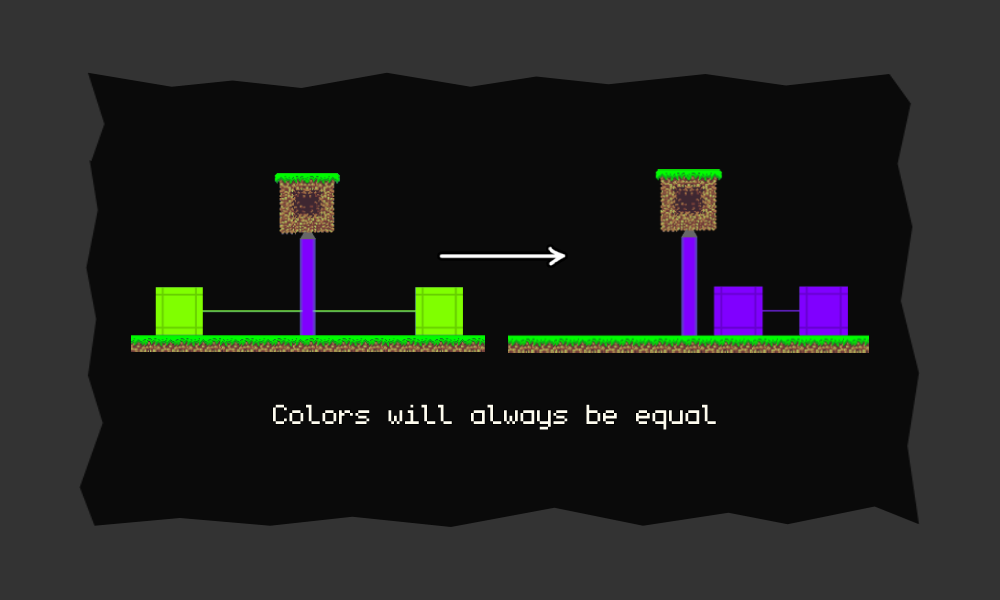
<style>
.page{position:relative;width:1000px;height:600px;background:#0a0a0a}
.page>*{position:absolute;margin:0}
.t1{font:44px "monogram";color:#fefcef}
</style>
<div class="page">
<p class="t1" style="left:273px;top:404px;width:443px;height:26px">Colors will always be equal</p>
</div>
